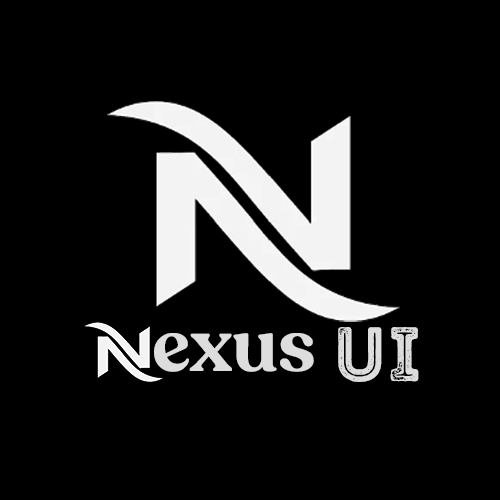
<style>
.page{position:relative;width:500px;height:500px;background:#000000}
.page>*{position:absolute;margin:0}
.t1{font:77.1px "IntroRustG-Base2Line";color:#dddddd}
.t2{font:77.8px "Recoleta-SemiBold";color:#dddddd}
</style>
<div class="page">
<p class="t1" style="left:338px;top:327px;width:81px;height:55px">UI</p>
<p class="t2" style="left:154px;top:333px;width:160px;height:39px">exus</p>
</div>
